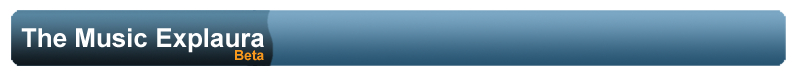
<style>
.page{position:relative;width:799px;height:75px;background:#ffffff}
.page>*{position:absolute;margin:0}
.t1{font:26px "Arial-BoldMT";color:#ffffff}
.t2{font:14px "Arial-BoldMT";color:#f8981d}
</style>
<div class="page">
<p class="t1" style="left:21px;top:28px;width:243px;height:25px">The Music Explaura</p>
<p class="t2" style="left:235px;top:50px;width:29px;height:11px">Beta</p>
</div>
